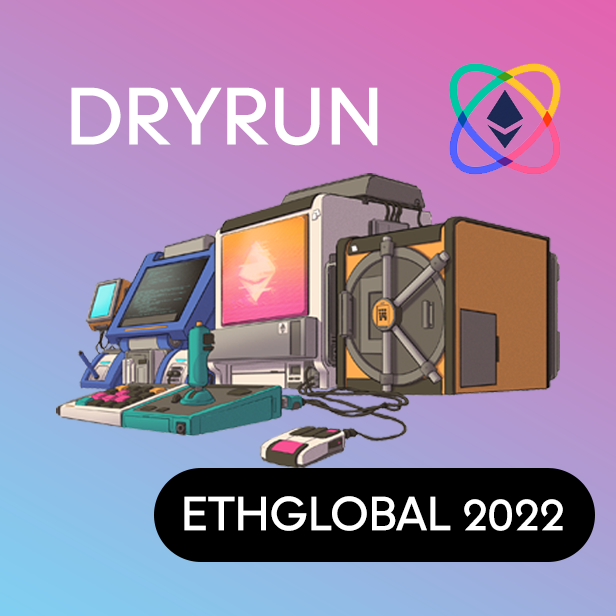
<style>
.page{position:relative;width:616px;height:616px}
.page>*{position:absolute;margin:0}
.t1{font:80.9px "Strawford-Medium";letter-spacing:-0.03em;color:#ffffff}
.t2{font:47.9px "Strawford-Medium";letter-spacing:-0.03em;color:#ffffff}
</style>
<div class="page">
<p class="t1" style="left:71px;top:87px;width:307px;height:59px">DRYRUN</p>
<p class="t2" style="left:184px;top:496px;width:379px;height:35px">ETHGLOBAL 2022</p>
</div>
